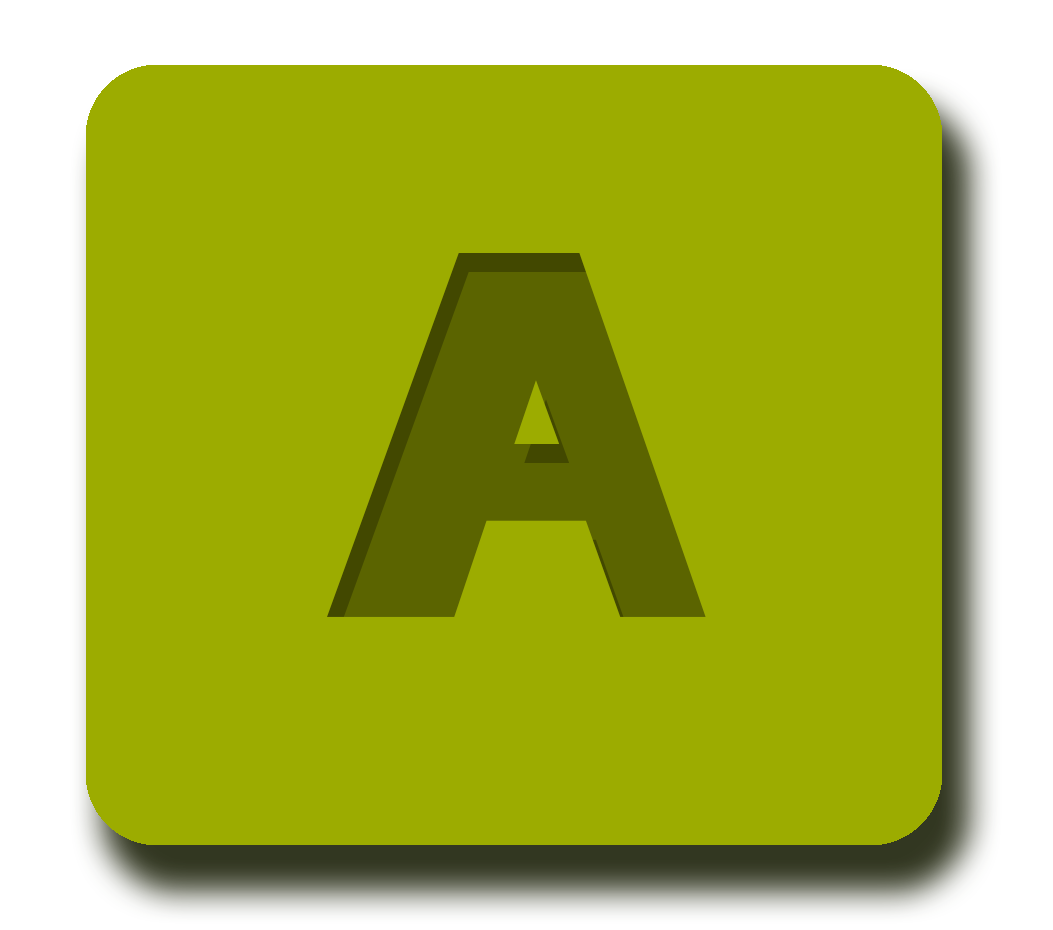
<style>
.page{position:relative;width:1053px;height:930px;background:#9cac00}
.page>*{position:absolute;margin:0}
.t1{font:504.7px "BadTyp-Regular";color:#5b6400}
</style>
<div class="page">
<p class="t1" style="left:327px;top:253px;width:379px;height:364px">A</p>
</div>
